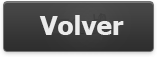
<style>
.page{position:relative;width:157px;height:57px}
.page>*{position:absolute;margin:0}
.t1{font:26px "Tahoma-Bold";color:#ececec}
</style>
<div class="page">
<p class="t1" style="left:39px;top:15px;width:85px;height:20px">Volver</p>
</div>
